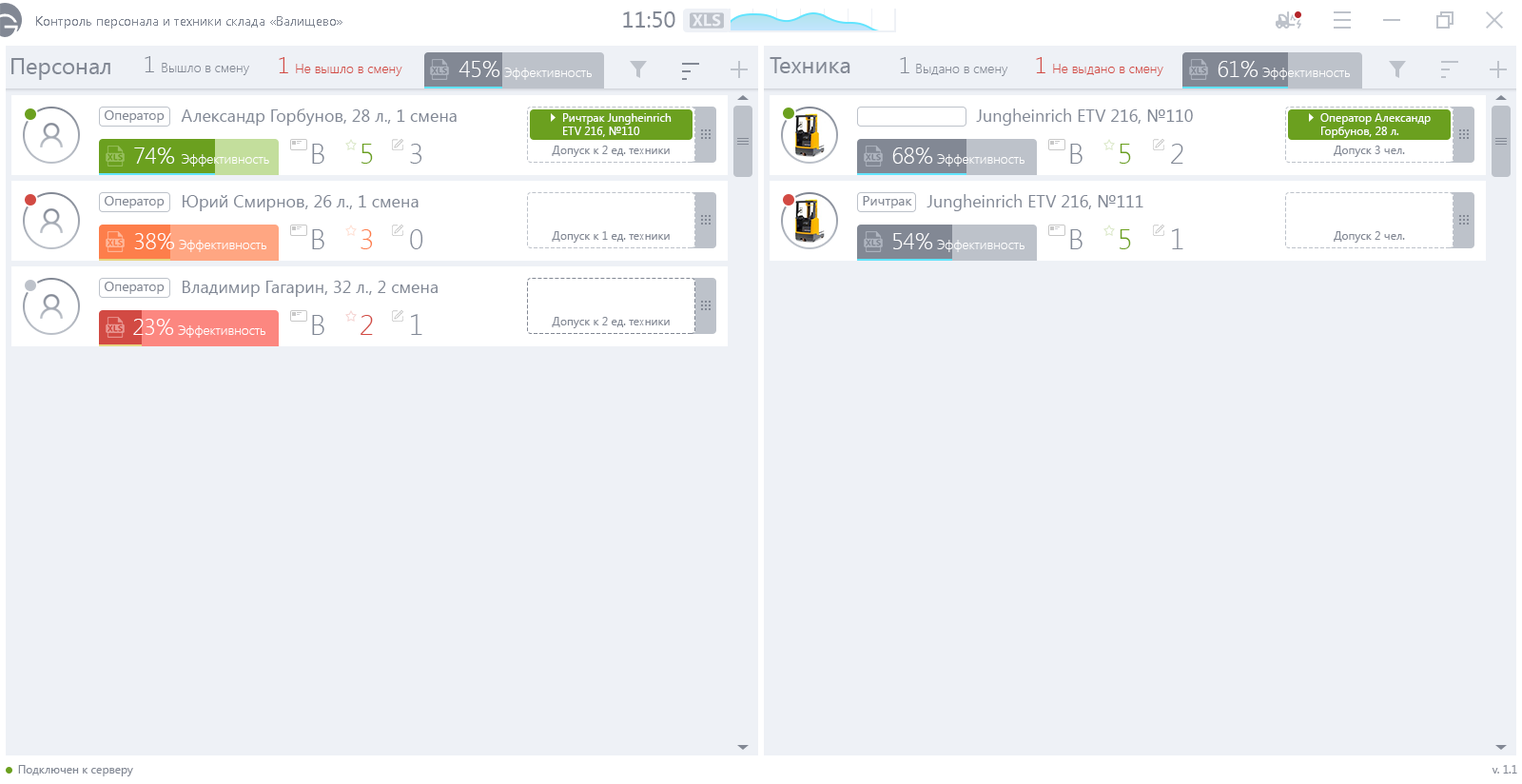
<style>
.page{position:relative;width:1522px;height:784px;background:#eef1f6}
.page>*{position:absolute;margin:0}
.t1{font:13.3px "SegoeUI";color:#828894}
.t2{font:22.8px "SegoeUI";color:#828894}
.t3{font:22.8px "SegoeUI-Light";color:#828894}
.t4{font:13.3px "SegoeUI-Light";color:#828894}
.t5{font:22.8px "SegoeUI-Light";color:#d24a43}
.t6{font:13.3px "SegoeUI-Light";color:#d24a43}
.t7{font:13.3px "SegoeUI-Light";color:#ffffff}
.t8{font:22.8px "SegoeUI-Light";color:#ffffff}
.t9{font:17.1px "SegoeUI";color:#818895}
.t10{font:11.4px "SegoeUI";color:#ffffff}
.t11{font:28.5px "SegoeUI-Light";color:#818895}
.t12{font:28.5px "SegoeUI-Light";color:#6ba01e}
.t13{font:11.4px "SegoeUI";color:#828894}
.t14{font:28.5px "SegoeUI-Light";color:#fd7e4b}
.t15{font:28.5px "SegoeUI-Light";color:#d24a43}
</style>
<div class="page">
<p class="t1" style="left:36px;top:16px;width:306px;height:13px">Контроль персонала и техники склада «Валищево»</p>
<p class="t2" style="left:623px;top:11px;width:52px;height:17px">11:50</p>
<p class="t2" style="left:11px;top:58px;width:99px;height:22px">Персонал</p>
<p class="t3" style="left:145px;top:56px;width:9px;height:16px">1</p>
<p class="t4" style="left:162px;top:63px;width:87px;height:12px">Вышло в смену</p>
<p class="t5" style="left:279px;top:57px;width:9px;height:16px">1</p>
<p class="t6" style="left:296px;top:64px;width:106px;height:12px">Не вышло в смену</p>
<p class="t7" style="left:458px;top:61px;width:134px;height:19px"><span class="t8">45%</span> Эффективность</p>
<p class="t2" style="left:769px;top:57px;width:81px;height:16px">Техника</p>
<p class="t3" style="left:900px;top:57px;width:9px;height:16px">1</p>
<p class="t4" style="left:916px;top:64px;width:92px;height:12px">Выдано в смену</p>
<p class="t5" style="left:1036px;top:57px;width:9px;height:16px">1</p>
<p class="t6" style="left:1053px;top:64px;width:110px;height:12px">Не выдано в смену</p>
<p class="t7" style="left:1217px;top:61px;width:133px;height:19px"><span class="t8">61%</span> Эффективность</p>
<p class="t1" style="left:105px;top:110px;width:60px;height:13px">Оператор</p>
<p class="t9" style="left:181px;top:108px;width:275px;height:18px">Александр Горбунов, 28 л., 1 смена</p>
<p class="t10" style="left:563px;top:113px;width:108px;height:24px;text-align:justify">Ричтрак Jungheinrich <br>ETV 216, №110</p>
<p class="t9" style="left:976px;top:108px;width:217px;height:18px">Jungheinrich ETV 216, №110</p>
<p class="t10" style="left:1320px;top:113px;width:110px;height:25px;text-align:justify">Оператор Александр<br>Горбунов, 28 л.</p>
<p class="t7" style="left:134px;top:147px;width:135px;height:19px"><span class="t8">74% </span>Эффективность</p>
<p class="t11" style="left:312px;top:144px;width:12px;height:20px">B</p>
<p class="t12" style="left:361px;top:144px;width:12px;height:20px">5</p>
<p class="t11" style="left:410px;top:144px;width:12px;height:20px">3</p>
<p class="t13" style="left:552px;top:146px;width:118px;height:11px">Допуск к 2 ед. техники</p>
<p class="t7" style="left:892px;top:147px;width:132px;height:19px"><span class="t8">68%</span> Эффективность</p>
<p class="t11" style="left:1070px;top:144px;width:12px;height:20px">B</p>
<p class="t12" style="left:1119px;top:144px;width:12px;height:20px">5</p>
<p class="t11" style="left:1171px;top:144px;width:12px;height:20px">2</p>
<p class="t13" style="left:1333px;top:146px;width:72px;height:11px">Допуск 3 чел.</p>
<p class="t1" style="left:105px;top:196px;width:60px;height:12px">Оператор</p>
<p class="t9" style="left:183px;top:195px;width:235px;height:16px">Юрий Смирнов, 26 л., 1 смена</p>
<p class="t1" style="left:863px;top:196px;width:49px;height:12px">Ричтрак</p>
<p class="t9" style="left:926px;top:194px;width:217px;height:17px">Jungheinrich ETV 216, №111</p>
<p class="t7" style="left:134px;top:233px;width:132px;height:19px"><span class="t8">38%</span> Эффективность</p>
<p class="t11" style="left:312px;top:229px;width:12px;height:20px">B</p>
<p class="t14" style="left:360px;top:229px;width:13px;height:20px">3</p>
<p class="t11" style="left:410px;top:229px;width:13px;height:20px">0</p>
<p class="t13" style="left:552px;top:231px;width:118px;height:12px">Допуск к 1 ед. техники</p>
<p class="t7" style="left:893px;top:233px;width:131px;height:19px"><span class="t8">54%</span> Эффективность</p>
<p class="t11" style="left:1070px;top:229px;width:12px;height:20px">B</p>
<p class="t12" style="left:1119px;top:229px;width:12px;height:20px">5</p>
<p class="t11" style="left:1172px;top:228px;width:11px;height:21px">1</p>
<p class="t13" style="left:1333px;top:231px;width:72px;height:12px">Допуск 2 чел.</p>
<p class="t1" style="left:105px;top:282px;width:60px;height:12px">Оператор</p>
<p class="t9" style="left:183px;top:281px;width:254px;height:16px">Владимир Гагарин, 32 л., 2 смена</p>
<p class="t11" style="left:312px;top:315px;width:12px;height:20px">B</p>
<p class="t15" style="left:360px;top:315px;width:13px;height:20px">2</p>
<p class="t11" style="left:411px;top:314px;width:11px;height:21px">1</p>
<p class="t13" style="left:552px;top:317px;width:118px;height:11px">Допуск к 2 ед. техники</p>
<p class="t7" style="left:133px;top:319px;width:132px;height:19px"><span class="t8">23%</span> Эффективность</p>
<p class="t13" style="left:18px;top:765px;width:115px;height:11px">Подключен к серверу</p>
<p class="t13" style="left:1491px;top:765px;width:26px;height:8px">v. 1.1</p>
</div>
